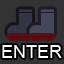
<style>
.page{position:relative;width:64px;height:64px;background:#333333}
.page>*{position:absolute;margin:0}
.t1{font:18px "ArialMT";color:#ffffff}
</style>
<div class="page">
<p class="t1" style="left:2px;top:45px;width:60px;height:13px">ENTER</p>
</div>
